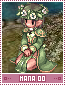
<style>
.page{position:relative;width:65px;height:85px}
.page>*{position:absolute;margin:0}
.t1{font:8px "pixmash";color:#ffffff}
</style>
<div class="page">
<p class="t1" style="left:20px;top:76px;width:25px;height:5px">MANA  00</p>
</div>
